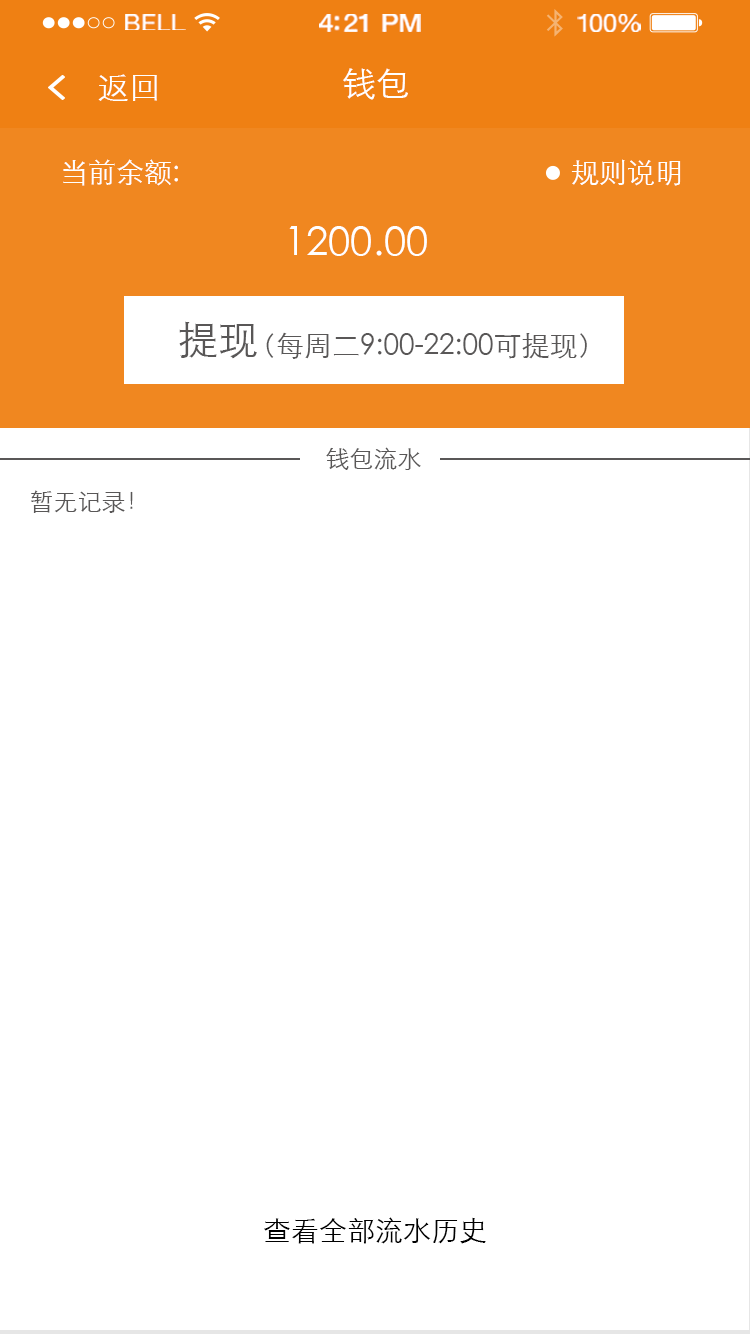
<style>
.page{position:relative;width:750px;height:1334px;background:#ffffff}
.page>*{position:absolute;margin:0}
.t1{font:23.3px "HelveticaNeue";letter-spacing:0.02em;color:#ffffff;scale:1.06 1}
.t2{font:25.3px "HelveticaNeue-Medium";letter-spacing:-0.02em;color:#ffffff;scale:1.06 1}
.t3{font:24.3px "HelveticaNeue";letter-spacing:-0.02em;color:#ffffff;scale:1.06 1}
.t4{font:32px "STXihei";color:#ffffff}
.t5{font:34px "STXihei";color:#ffffff}
.t6{font:28px "STXihei";color:#ffffff}
.t7{font:40px "STXihei";color:#ffffff}
.t8{font:40px "STXihei";color:#595757}
.t9{font:28px "STXihei";color:#595757}
.t10{font:24px "STXihei";color:#595757}
.t11{font:28px "STXihei";color:#000000}
</style>
<div class="page">
<p class="t1" style="left:125px;top:14px;width:61px;height:16px">BELL</p>
<p class="t2" style="left:319px;top:14px;width:102px;height:18px">4:21 PM</p>
<p class="t3" style="left:577px;top:14px;width:64px;height:18px">100%</p>
<p class="t4" style="left:98px;top:74px;width:59px;height:27px">返回</p>
<p class="t5" style="left:343px;top:68px;width:65px;height:32px">钱包</p>
<p class="t6" style="left:63px;top:159px;width:115px;height:27px">当前余额:</p>
<p class="t6" style="left:571px;top:159px;width:110px;height:27px">规则说明</p>
<p class="t7" style="left:289px;top:226px;width:138px;height:30px">1200.00</p>
<p class="t8" style="left:179px;top:321px;width:78px;height:38px">提现</p>
<p class="t9" style="left:266px;top:332px;width:321px;height:27px">（每周二9:00-22:00可提现）</p>
<p class="t10" style="left:326px;top:447px;width:95px;height:23px">钱包流水</p>
<p class="t10" style="left:31px;top:490px;width:102px;height:23px">暂无记录！</p>
<p class="t11" style="left:264px;top:1217px;width:222px;height:27px">查看全部流水历史</p>
</div>
